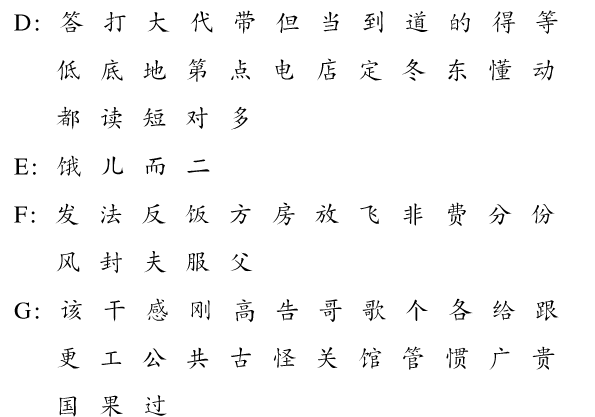
<style>
.page{position:relative;width:595px;height:417px;background:#ffffff}
.page>*{position:absolute;margin:0}
.t1{font:24px/48px "CTKaiTiSJ";letter-spacing:0.1em;color:#000000}
</style>
<div class="page">
<p class="t1" style="left:14px;top:10px;width:545px;height:407px">D:  答  打  大  代  带  但  当  到  道  的  得  等  <br>     低  底  地  第  点  电  店  定  冬  东  懂  动  <br>     都  读  短  对  多  <br>E:  饿  儿  而  二  <br>F:  发  法  反  饭  方  房  放  飞  非  费  分  份  <br>     风  封  夫  服  父 <br>G:  该  干  感  刚  高  告  哥  歌  个  各  给  跟  <br>     更  工  公  共  古  怪  关  馆  管  惯  广  贵  <br>     国  果  过</p>
</div>
